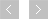
<style>
.page{position:relative;width:48px;height:19px;background:#c0c0c0}
.page>*{position:absolute;margin:0}
.t1{font:12px "SimSun";letter-spacing:0.02em;color:#ffffff}
</style>
<div class="page">
<p class="t1" style="left:6px;top:5px;width:5px;height:9px">&lt;</p>
<p class="t1" style="left:36px;top:5px;width:5px;height:9px">&gt;</p>
</div>
